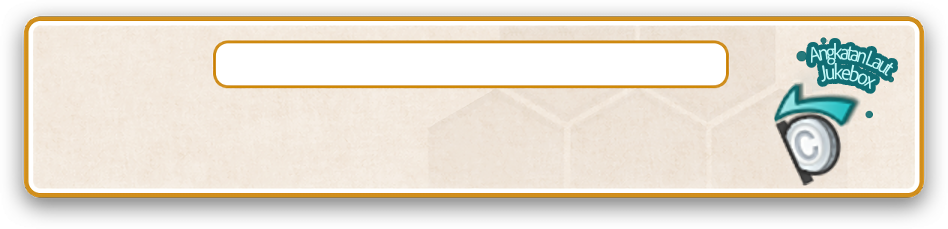
<style>
.page{position:relative;width:948px;height:229px}
.page>*{position:absolute;margin:0}
.t1{font:22px/20px "AdobeClean-Regular";letter-spacing:-0.08em;color:#c2f7f7;scale:0.6 1}
.t2{font:22px/20px "AdobeClean-Regular";letter-spacing:-0.08em;color:#c2f7f7;scale:0.8 1}
</style>
<div class="page">
<p class="t1" style="left:810px;top:43px;width:84px;height:47px;text-align:center;rotate:10deg">Angkatan Laut<br><span class="t2">Jukebox</span></p>
</div>
